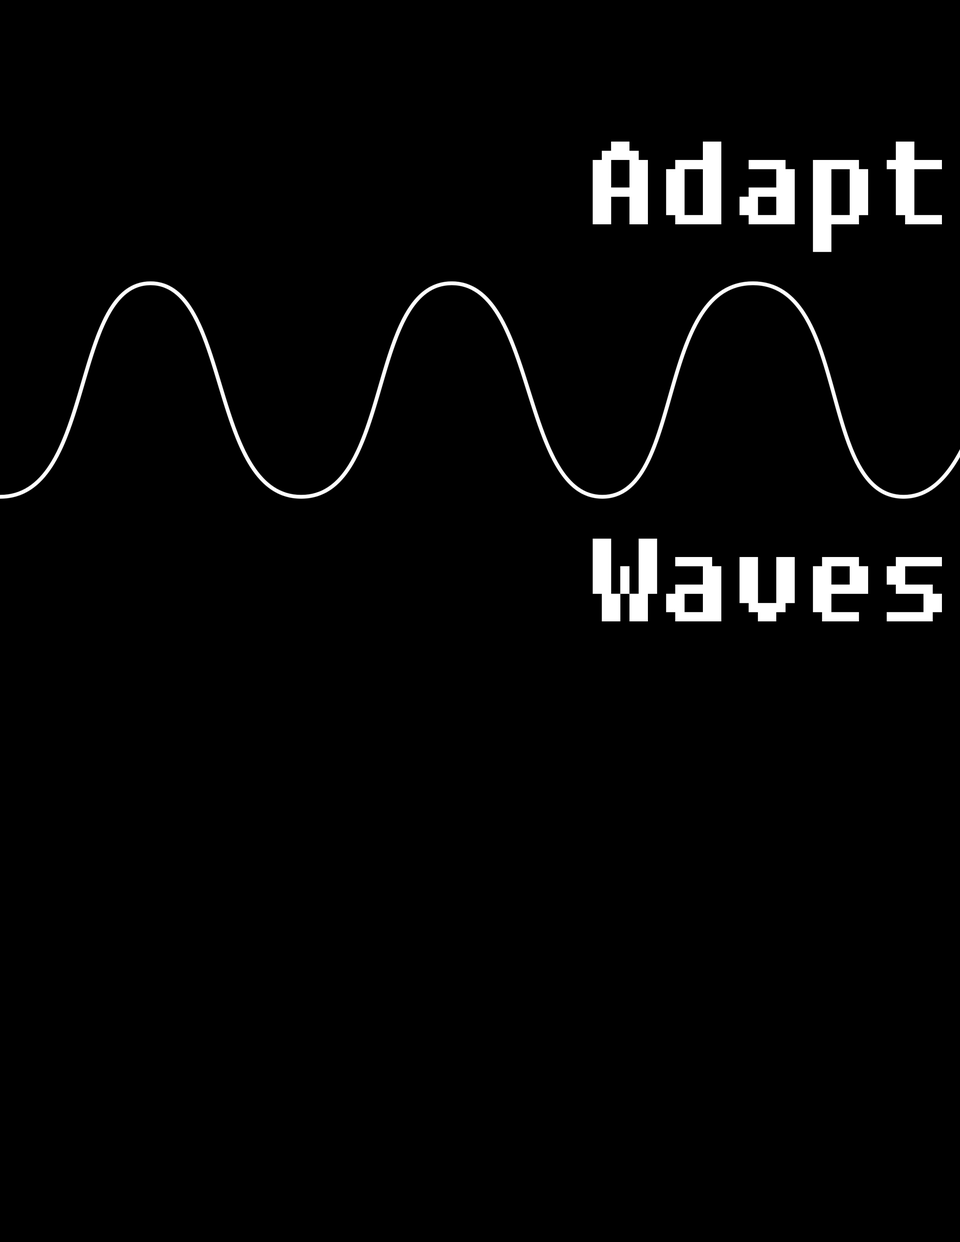
<style>
.page{position:relative;width:960px;height:1242px;background:#000000}
.page>*{position:absolute;margin:0}
.t1{font:117.6px "Fixedsys";color:#ffffff}
</style>
<div class="page">
<p class="t1" style="left:593px;top:142px;width:349px;height:110px">Adapt</p>
<p class="t1" style="left:593px;top:539px;width:349px;height:82px">Waves</p>
</div>
